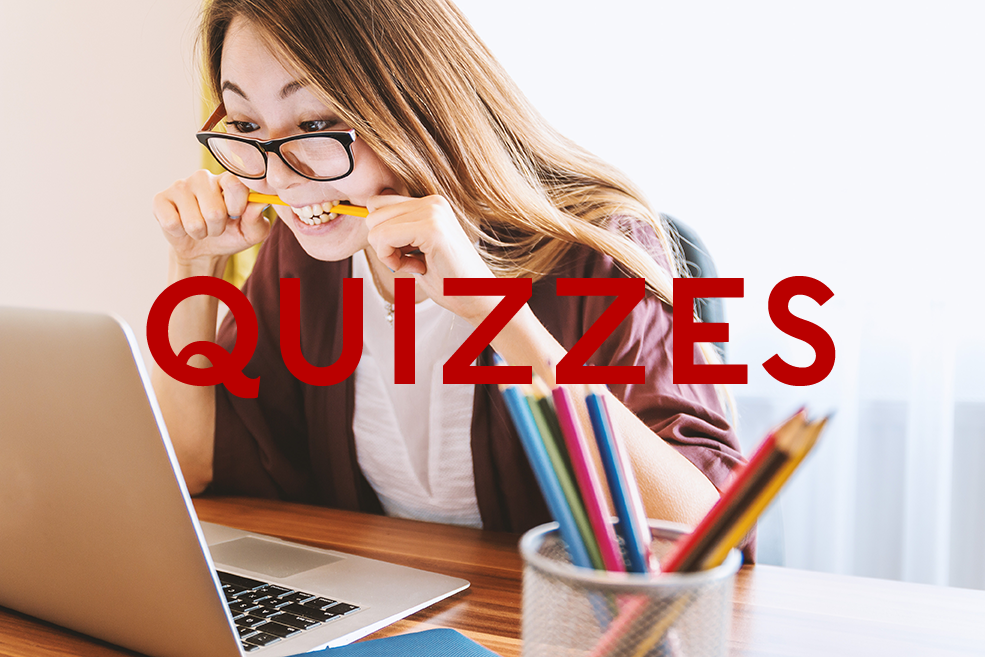
<style>
.page{position:relative;width:985px;height:657px}
.page>*{position:absolute;margin:0}
.t1{font:150px "CaslonsEgyptian-Regular";color:#ba0000}
</style>
<div class="page">
<p class="t1" style="left:146px;top:275px;width:690px;height:124px">QUIZZES</p>
</div>
